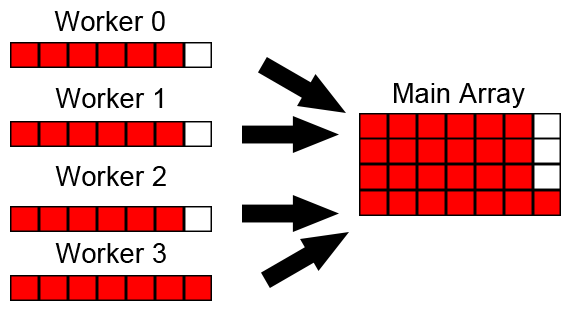
<style>
.page{position:relative;width:588px;height:312px;background:#ffffff}
.page>*{position:absolute;margin:0}
.t1{font:27px "ArialMT";letter-spacing:0.01em;color:#000000}
</style>
<div class="page">
<p class="t1" style="left:54px;top:11px;width:111px;height:20px">Worker 0</p>
<p class="t1" style="left:55px;top:88px;width:108px;height:20px">Worker 1</p>
<p class="t1" style="left:394px;top:83px;width:131px;height:25px">Main Array</p>
<p class="t1" style="left:55px;top:166px;width:111px;height:20px">Worker 2</p>
<p class="t1" style="left:55px;top:243px;width:111px;height:20px">Worker 3</p>
</div>
